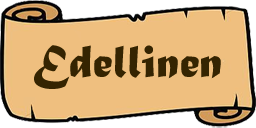
<style>
.page{position:relative;width:256px;height:128px;background:#efbf7f}
.page>*{position:absolute;margin:0}
.t1{font:48px "MaturaMTScriptCapitals";color:#352401}
</style>
<div class="page">
<p class="t1" style="left:34px;top:45px;width:187px;height:44px">Edellinen</p>
</div>
